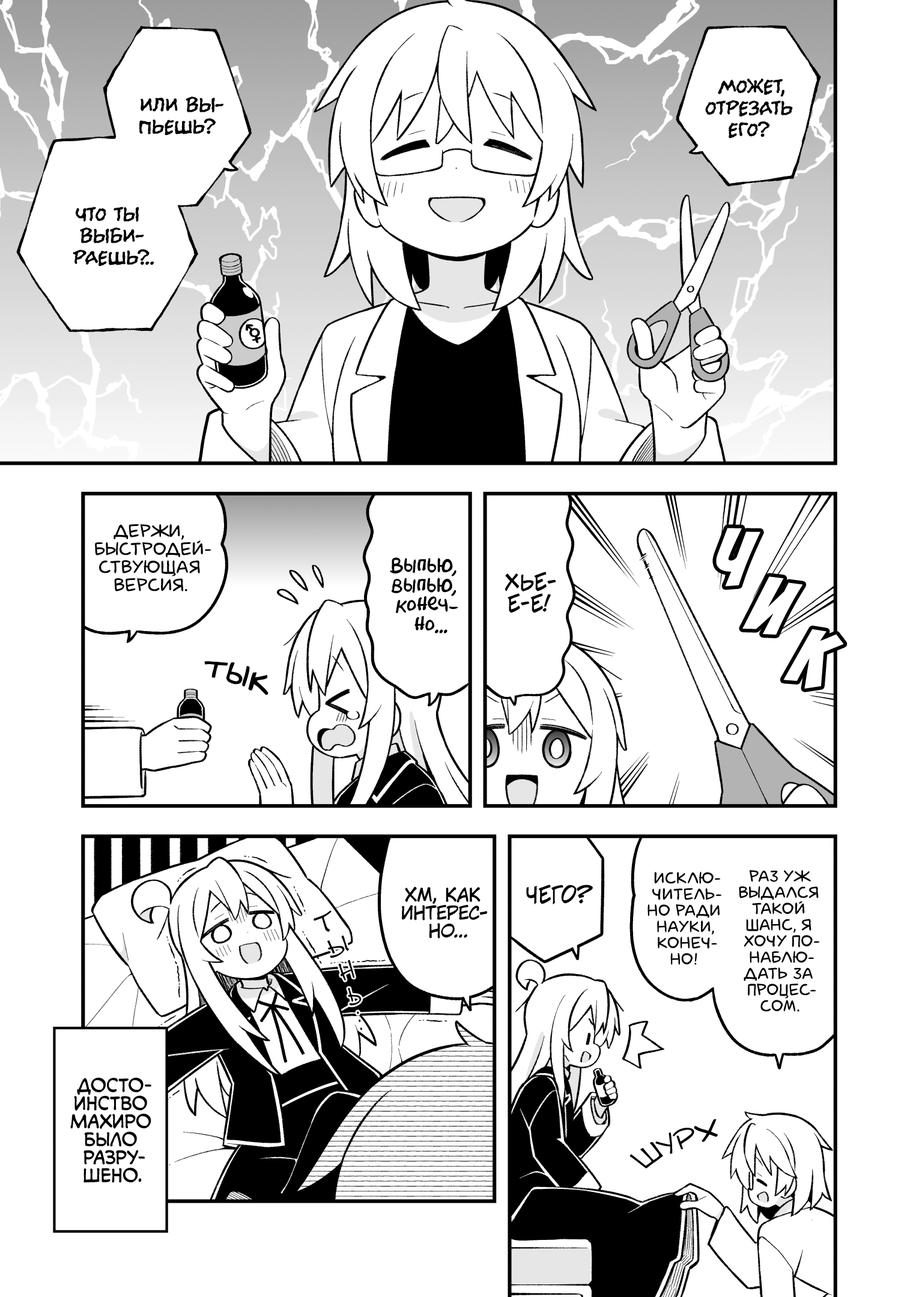
<style>
.page{position:relative;width:919px;height:1297px;background:#ffffff}
.page>*{position:absolute;margin:0}
.t1{font:21.6px "el_CCEvilSchemes";color:#000000}
.t2{font:21.6px "el_CCEvilSchemes";color:#000000;text-transform:uppercase}
.t3{font:21.6px "el_CCEvilSchemes";letter-spacing:-0.1em;color:#000000}
.t4{font:18px "laCartoonerie";color:#000000;text-transform:uppercase}
.t5{font:90.1px "BadaBoom";color:#ffffff}
.t6{font:19.8px "AkbarPlain";color:#000000}
.t7{font:21.6px "v_CCJeffCampbell";color:#000000;text-transform:uppercase}
.t8{font:39.6px "v_Augie";color:#000000}
.t9{font:16.2px "laCartoonerie";color:#000000;text-transform:uppercase}
.t10{font:18px "KuraiVoice2";color:#000000;text-transform:uppercase}
.t11{font:18px "v_CCMonologous";color:#000000;text-transform:uppercase}
.t12{font:25.2px "v_Augie";color:#000000;text-transform:uppercase}
</style>
<div class="page">
<p class="t1" style="left:705px;top:79px;width:88px;height:59px;text-align:center">Может,<br>отрезать<br>его?</p>
<p class="t2" style="left:139px;top:97px;width:84px;height:38px;text-align:center">или вы-<br>пьешь?</p>
<p class="t1" style="left:73px;top:207px;width:81px;height:59px;text-align:center">Что ты<br>выби-<br>раешь<span class="t3">?</span>..</p>
<p class="t4" style="left:95px;top:524px;width:116px;height:68px;text-align:center">Держи,<br>быстродей-<br>ствующая<br>версия.</p>
<p class="t5" style="left:716px;top:528px;width:44px;height:59px;rotate:11deg">ч</p>
<p class="t6" style="left:390px;top:557px;width:68px;height:77px;text-align:center">Выпью,<br>выпью,<br>конеч-<br>но...</p>
<p class="t7" style="left:505px;top:572px;width:51px;height:41px;text-align:center">Хье-<br>е-е!</p>
<p class="t5" style="left:742px;top:577px;width:61px;height:58px;rotate:17deg">и</p>
<p class="t5" style="left:783px;top:629px;width:61px;height:60px;rotate:20deg">к</p>
<p class="t8" style="left:204px;top:661px;width:65px;height:35px;rotate:14deg">тык</p>
<p class="t9" style="left:648px;top:872px;width:73px;height:93px;text-align:center">Исклю-<br>читель-<br>но ради<br>науки,<br>конеч-<br>но!</p>
<p class="t9" style="left:739px;top:870px;width:80px;height:142px;text-align:center">Раз уж<br>выдался<br>такой<br>шанс, я<br>хочу по-<br>наблю-<br>дать за<br>процес-<br>сом.</p>
<p class="t10" style="left:402px;top:887px;width:85px;height:52px;text-align:center">Хм, как<br>интерес-<br>но...</p>
<p class="t7" style="left:526px;top:885px;width:67px;height:20px">Чего?</p>
<p class="t11" style="left:70px;top:1078px;width:81px;height:105px;text-align:center">Досто-<br>инство<br>Махиро<br>было<br>разру-<br>шено.</p>
<p class="t12" style="left:630px;top:1119px;width:88px;height:50px;rotate:-22deg">шурх</p>
</div>
